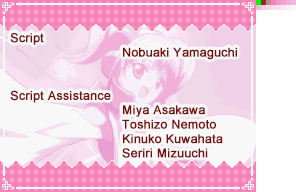
<style>
.page{position:relative;width:296px;height:192px;background:#f8f8f8}
.page>*{position:absolute;margin:0}
.t1{font:12px "ArialMT";letter-spacing:0.015em;color:#781010;font-weight:bold}
</style>
<div class="page">
<p class="t1" style="left:10px;top:33px;width:227px;height:125px">Script<br>         Nobuaki Yamaguchi<br><br><br>Script Assistance<br>         Miya Asakawa<br>         Toshizo Nemoto<br>         Kinuko Kuwahata<br>         Seriri Mizuuchi</p>
</div>
